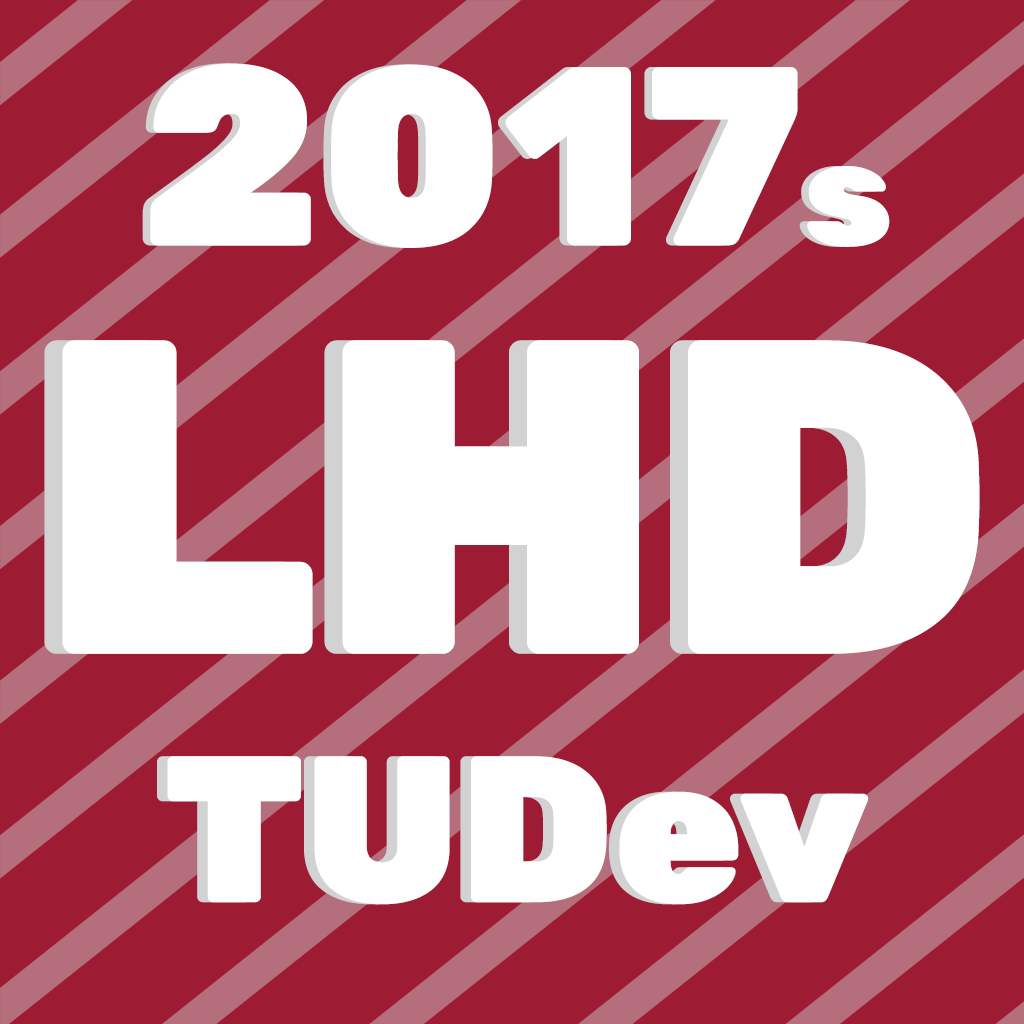
<style>
.page{position:relative;width:1024px;height:1024px;background:#9e1b34}
.page>*{position:absolute;margin:0}
.t1{font:254.4px "Rubik-Black";color:#ffffff}
.t2{font:149.4px "Rubik-Black";color:#ffffff}
.t3{font:447.5px "Rubik-Black";color:#ffffff}
.t4{font:208.1px "Rubik-Black";color:#ffffff}
</style>
<div class="page">
<p class="t1" style="left:142px;top:63px;width:740px;height:185px">2017<span class="t2">s</span></p>
<p class="t1" style="left:150px;top:63px;width:740px;height:185px">2017<span class="t2">s</span></p>
<p class="t3" style="left:44px;top:340px;width:918px;height:314px">LHD</p>
<p class="t3" style="left:62px;top:340px;width:918px;height:314px">LHD</p>
<p class="t4" style="left:157px;top:756px;width:701px;height:149px">TUDev</p>
<p class="t4" style="left:167px;top:756px;width:702px;height:149px">TUDev</p>
</div>
